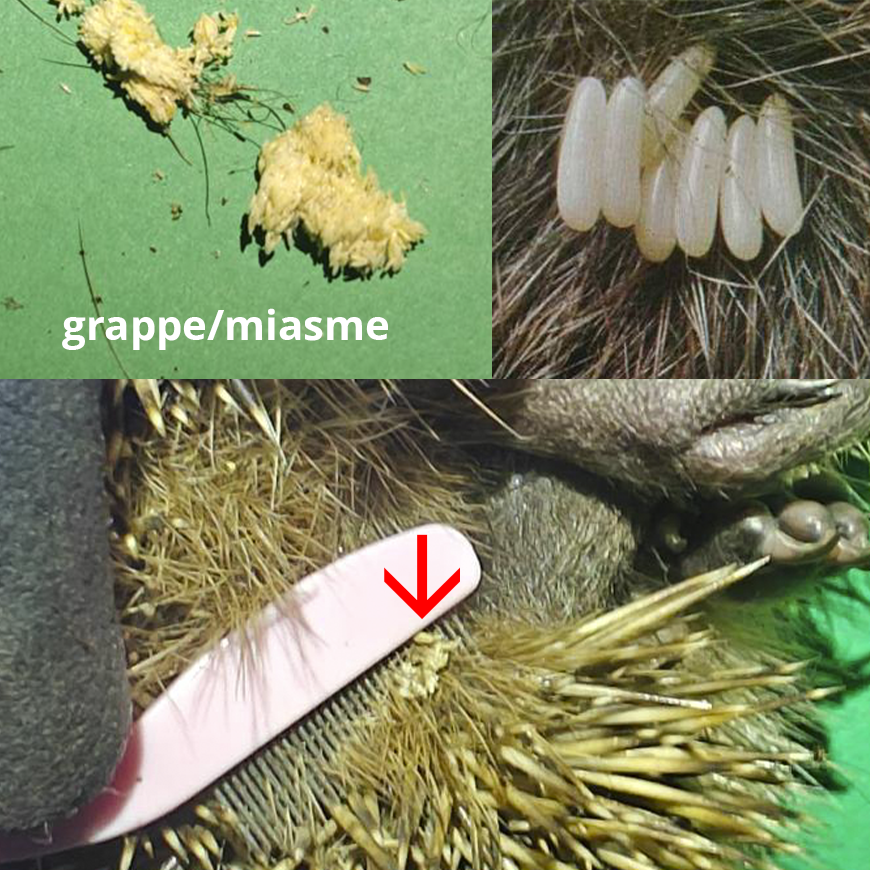
<style>
.page{position:relative;width:870px;height:870px}
.page>*{position:absolute;margin:0}
.t1{font:41.7px "OpenSans-Bold";color:#ffffff}
</style>
<div class="page">
<p class="t1" style="left:62px;top:308px;width:326px;height:42px">grappe/miasme</p>
</div>
